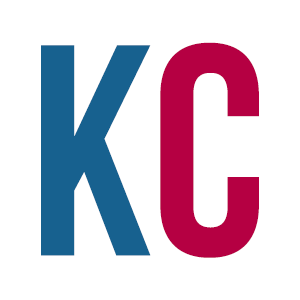
<style>
.page{position:relative;width:300px;height:300px;background:#ffffff}
.page>*{position:absolute;margin:0}
.t1{font:300px "BebasNeue";color:#17618f}
.t2{font:300px "BebasNeue";color:#b50042}
</style>
<div class="page">
<p class="t1" style="left:41px;top:42px;width:218px;height:216px">K<span class="t2">C</span></p>
</div>
